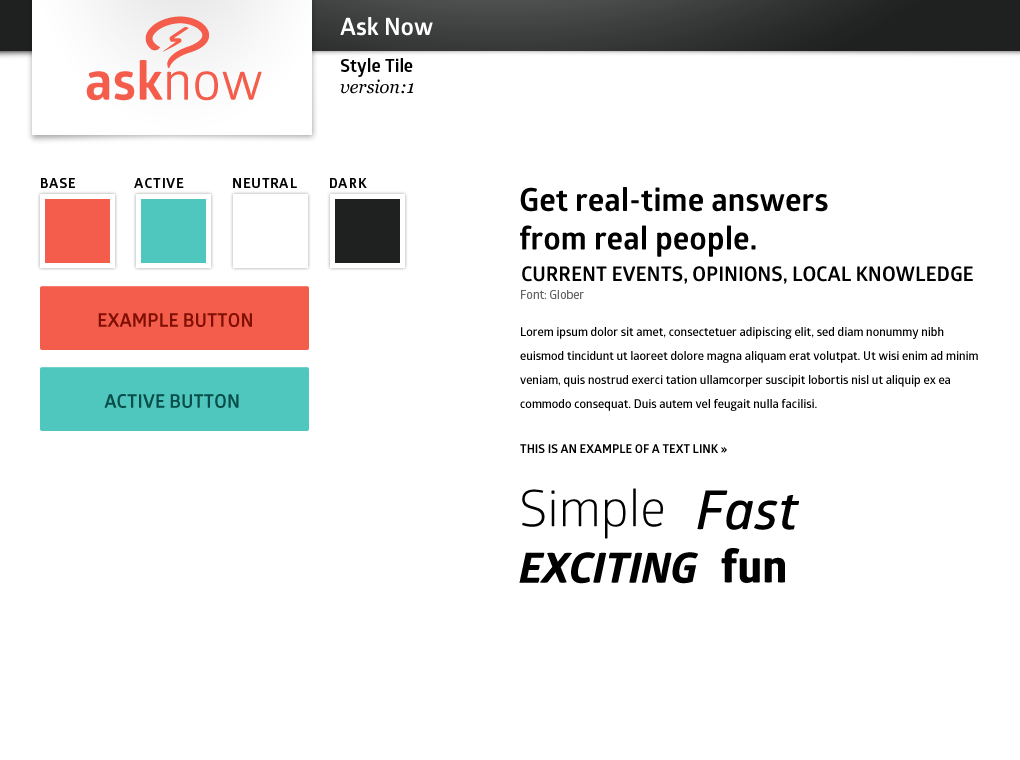
<style>
.page{position:relative;width:1020px;height:760px;background:#ffffff}
.page>*{position:absolute;margin:0}
.t1{font:24px "GloberBold";color:#ffffff}
.t2{font:18px "GloberBold";color:#000000}
.t3{font:18px "Georgia-Italic";color:#000000}
.t4{font:14px "GloberBold";letter-spacing:0.05em;color:#000000;text-transform:uppercase}
.t5{font:32px "GloberBold";color:#000000}
.t6{font:20px "GloberBold";color:#000000;text-transform:uppercase}
.t7{font:12px "GloberRegular";color:#666666}
.t8{font:18.6px "GloberBold";color:#7e0f02}
.t9{font:12px/24px "GloberSemiBold";color:#000000}
.t10{font:18.6px "GloberBold";color:#074e49}
.t11{font:12px "GloberBold";color:#000000;text-transform:uppercase}
.t12{font:50.2px "GloberBook";color:#000000}
.t13{font:53.8px "GloberSemiBoldItalic";color:#000000}
.t14{font:41.7px "GloberxBoldItalic";color:#000000}
.t15{font:45.9px "GloberxBold";color:#000000}
</style>
<div class="page">
<p class="t1" style="left:340px;top:17px;width:93px;height:19px">Ask Now</p>
<p class="t2" style="left:341px;top:58px;width:72px;height:19px">Style Tile</p>
<p class="t3" style="left:340px;top:79px;width:74px;height:15px">version:1</p>
<p class="t4" style="left:41px;top:178px;width:34px;height:10px">Base</p>
<p class="t4" style="left:134px;top:178px;width:50px;height:10px">active</p>
<p class="t4" style="left:233px;top:178px;width:64px;height:10px">neutral</p>
<p class="t4" style="left:330px;top:178px;width:37px;height:10px">DARK</p>
<p class="t5" style="left:520px;top:187px;width:308px;height:70px">Get real-time answers <br>from real people.</p>
<p class="t6" style="left:522px;top:266px;width:451px;height:18px">current events, opinions, local knowledge</p>
<p class="t7" style="left:521px;top:290px;width:63px;height:9px">Font: Glober</p>
<p class="t8" style="left:98px;top:313px;width:154px;height:14px">EXAMPLE BUTTON</p>
<p class="t9" style="left:520px;top:327px;width:458px;height:84px">Lorem ipsum dolor sit amet, consectetuer adipiscing elit, sed diam nonummy nibh euismod tincidunt ut laoreet dolore magna aliquam erat volutpat. Ut wisi enim ad minim veniam, quis nostrud exerci tation ullamcorper suscipit lobortis nisl ut aliquip ex ea commodo consequat. Duis autem vel feugait nulla facilisi.</p>
<p class="t10" style="left:104px;top:394px;width:135px;height:14px">ACTIVE BUTTON</p>
<p class="t11" style="left:520px;top:444px;width:207px;height:9px">This is an example of a Text link »</p>
<p class="t12" style="left:522px;top:488px;width:141px;height:51px">Simple</p>
<p class="t13" style="left:697px;top:490px;width:102px;height:40px">Fast</p>
<p class="t14" style="left:519px;top:552px;width:179px;height:32px">EXCITING</p>
<p class="t15" style="left:721px;top:548px;width:64px;height:35px">fun</p>
</div>
